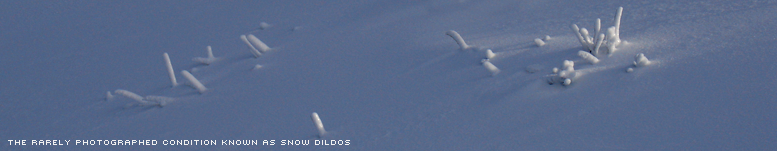
<style>
.page{position:relative;width:777px;height:151px}
.page>*{position:absolute;margin:0}
.t1{font:10px "Mini7";color:#f0f0f0}
</style>
<div class="page">
<p class="t1" style="left:8px;top:140px;width:342px;height:5px">the rarely photographed condition known as snow dildos</p>
</div>
